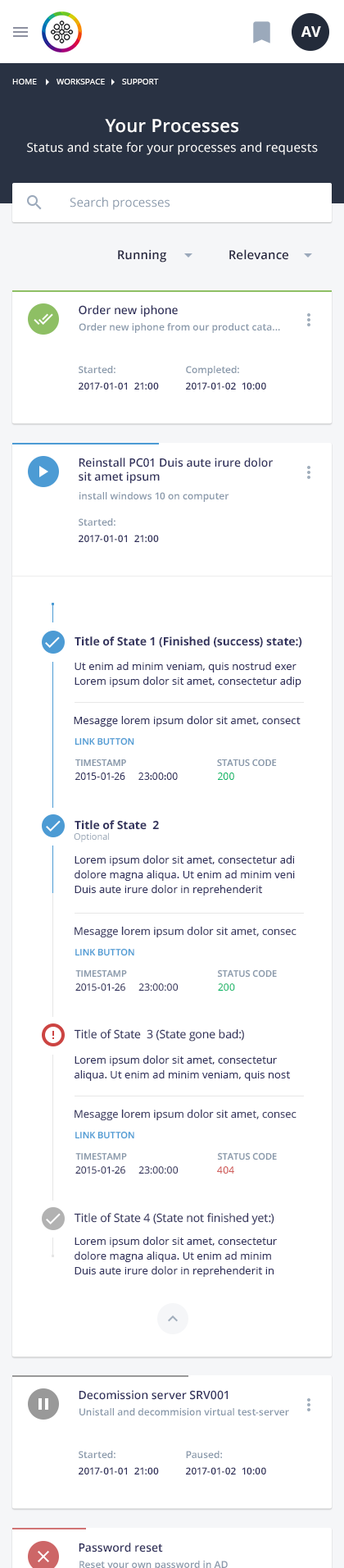
<style>
.page{position:relative;width:344px;height:1568px;background:#ffffff}
.page>*{position:absolute;margin:0}
.t1{font:14.8px "OpenSans-Bold";color:#ffffff;text-transform:uppercase}
.t2{font:8.2px "OpenSans";color:#ffffff;text-transform:uppercase}
.t3{font:18px "OpenSans-Semibold";letter-spacing:0.02em;color:#ffffff}
.t4{font:12.3px "OpenSans";letter-spacing:0.02em;color:#ffffff}
.t5{font:12.3px "OpenSans";letter-spacing:0.01em;color:#8898aa}
.t6{font:12.3px "OpenSans-Semibold";letter-spacing:0.01em;color:#23233d}
.t7{font:11.5px "OpenSans-Semibold";color:#32325d}
.t8{font:9.8px "OpenSans-Semibold";color:#8898aa}
.t9{font:9.8px/16.4px "OpenSans-Semibold";color:#32325d}
.t10{font:9.8px/16.4px "OpenSans-Semibold";color:#8898aa}
.t11{font:11.5px "OpenSans-Bold";color:#32325d}
.t12{font:10.7px/14.8px "OpenSans";letter-spacing:0.005em;color:#32325d}
.t13{font:10.7px "OpenSans";letter-spacing:0.005em;color:#32325d}
.t14{font:9px "OpenSans-Semibold";color:#4c9bd4}
.t15{font:9px "OpenSans-Semibold";color:#8898aa;text-transform:uppercase}
.t16{font:9.8px "OpenSans";letter-spacing:0.005em;color:#32325d}
.t17{font:9.8px "OpenSans";letter-spacing:0.005em;color:#0cb869}
.t18{font:9px "OpenSans";color:#8898aa}
.t19{font:10.6px "OpenSans";letter-spacing:0.005em;color:#32325d}
.t20{font:11.5px "OpenSans";color:#32325d}
.t21{font:9.8px "OpenSans";letter-spacing:0.005em;color:#cc4442}
</style>
<div class="page">
<p class="t1" style="left:301px;top:26px;width:20px;height:11px">AV</p>
<p class="t2" style="left:12px;top:79px;width:25px;height:5px">Home</p>
<p class="t2" style="left:57px;top:79px;width:48px;height:5px">Workspace</p>
<p class="t2" style="left:122px;top:79px;width:37px;height:5px">Support</p>
<p class="t3" style="left:105px;top:119px;width:134px;height:14px">Your Processes</p>
<p class="t4" style="left:27px;top:142px;width:291px;height:13px">Status and state for your processes and requests</p>
<p class="t5" style="left:70px;top:197px;width:100px;height:13px">Search processes</p>
<p class="t6" style="left:118px;top:249px;width:48px;height:13px">Running</p>
<p class="t6" style="left:230px;top:249px;width:59px;height:11px">Relevance</p>
<p class="t7" style="left:79px;top:305px;width:99px;height:12px">Order new iphone</p>
<p class="t8" style="left:79px;top:323px;width:201px;height:10px">Order new iphone from our product cata...</p>
<p class="t9" style="left:79px;top:366px;width:80px;height:24px"><span class="t10">Started: <br></span>2017-01-01  21:00</p>
<p class="t9" style="left:186px;top:366px;width:81px;height:24px"><span class="t10">Completed: <br></span>2017-01-02  10:00</p>
<p class="t7" style="left:79px;top:458px;width:194px;height:26px">Reinstall PC01 Duis aute irure dolor<br>sit amet ipsum</p>
<p class="t8" style="left:80px;top:492px;width:150px;height:10px">install windows 10 on computer</p>
<p class="t9" style="left:79px;top:518px;width:80px;height:24px"><span class="t10">Started: <br></span>2017-01-01  21:00</p>
<p class="t11" style="left:75px;top:636px;width:228px;height:12px">Title of State 1 (Finished (success) state:)</p>
<p class="t12" style="left:75px;top:662px;width:227px;height:25px">Ut enim ad minim veniam, quis nostrud exer<br>Lorem ipsum dolor sit amet, consectetur adip</p>
<p class="t13" style="left:74px;top:716px;width:227px;height:11px">Mesagge lorem ipsum dolor sit amet, consect</p>
<p class="t14" style="left:75px;top:737px;width:59px;height:8px">LINK BUTTON</p>
<p class="t15" style="left:75px;top:759px;width:51px;height:7px">timestamp</p>
<p class="t15" style="left:217px;top:759px;width:60px;height:7px">Status code</p>
<p class="t16" style="left:75px;top:773px;width:103px;height:7px">2015-01-26     23:00:00</p>
<p class="t17" style="left:218px;top:773px;width:17px;height:7px">200</p>
<p class="t11" style="left:75px;top:820px;width:84px;height:10px">Title of State  2</p>
<p class="t18" style="left:74px;top:832px;width:35px;height:10px">Optional</p>
<p class="t12" style="left:75px;top:855px;width:220px;height:41px">Lorem ipsum dolor sit amet, consectetur adi<br>dolore magna aliqua. Ut enim ad minim veni<br>Duis aute irure dolor in reprehenderit</p>
<p class="t19" style="left:75px;top:926px;width:222px;height:12px">Mesagge lorem ipsum dolor sit amet, consec</p>
<p class="t14" style="left:75px;top:948px;width:59px;height:8px">LINK BUTTON</p>
<p class="t15" style="left:75px;top:969px;width:52px;height:9px">timestamp</p>
<p class="t15" style="left:217px;top:969px;width:60px;height:9px">Status code</p>
<p class="t16" style="left:75px;top:983px;width:104px;height:8px">2015-01-26     23:00:00</p>
<p class="t17" style="left:218px;top:983px;width:17px;height:8px">200</p>
<p class="t20" style="left:74px;top:1029px;width:170px;height:13px">Title of State  3 (State gone bad:)</p>
<p class="t12" style="left:75px;top:1055px;width:215px;height:26px">Lorem ipsum dolor sit amet, consectetur <br>aliqua. Ut enim ad minim veniam, quis nost</p>
<p class="t19" style="left:75px;top:1109px;width:222px;height:12px">Mesagge lorem ipsum dolor sit amet, consec</p>
<p class="t14" style="left:75px;top:1131px;width:59px;height:8px">LINK BUTTON</p>
<p class="t15" style="left:75px;top:1152px;width:52px;height:8px">timestamp</p>
<p class="t15" style="left:217px;top:1152px;width:60px;height:8px">Status code</p>
<p class="t16" style="left:75px;top:1166px;width:104px;height:8px">2015-01-26     23:00:00</p>
<p class="t21" style="left:217px;top:1166px;width:18px;height:8px">404</p>
<p class="t20" style="left:74px;top:1213px;width:201px;height:12px">Title of State 4 (State not finished yet:)</p>
<p class="t12" style="left:75px;top:1237px;width:202px;height:40px">Lorem ipsum dolor sit amet, consectetur<br>dolore magna aliqua. Ut enim ad minim<br>Duis aute irure dolor in reprehenderit in</p>
<p class="t7" style="left:79px;top:1390px;width:149px;height:10px">Decomission server SRV001</p>
<p class="t8" style="left:80px;top:1408px;width:209px;height:7px">Unistall and decommision virtual test-server</p>
<p class="t9" style="left:79px;top:1451px;width:80px;height:24px"><span class="t10">Started: <br></span>2017-01-01  21:00</p>
<p class="t9" style="left:186px;top:1451px;width:81px;height:24px"><span class="t10">Paused:<br></span>2017-01-02  10:00</p>
<p class="t7" style="left:79px;top:1543px;width:84px;height:9px">Password reset</p>
</div>
